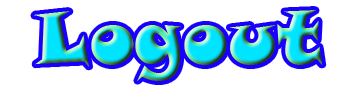
<style>
.page{position:relative;width:360px;height:90px;background:#ffffff}
.page>*{position:absolute;margin:0}
.t1{font:74.3px "SnapITC-Regular"}
</style>
<div class="page">
<p class="t1" style="left:34px;top:10px;width:289px;height:71px">Logout</p>
</div>
